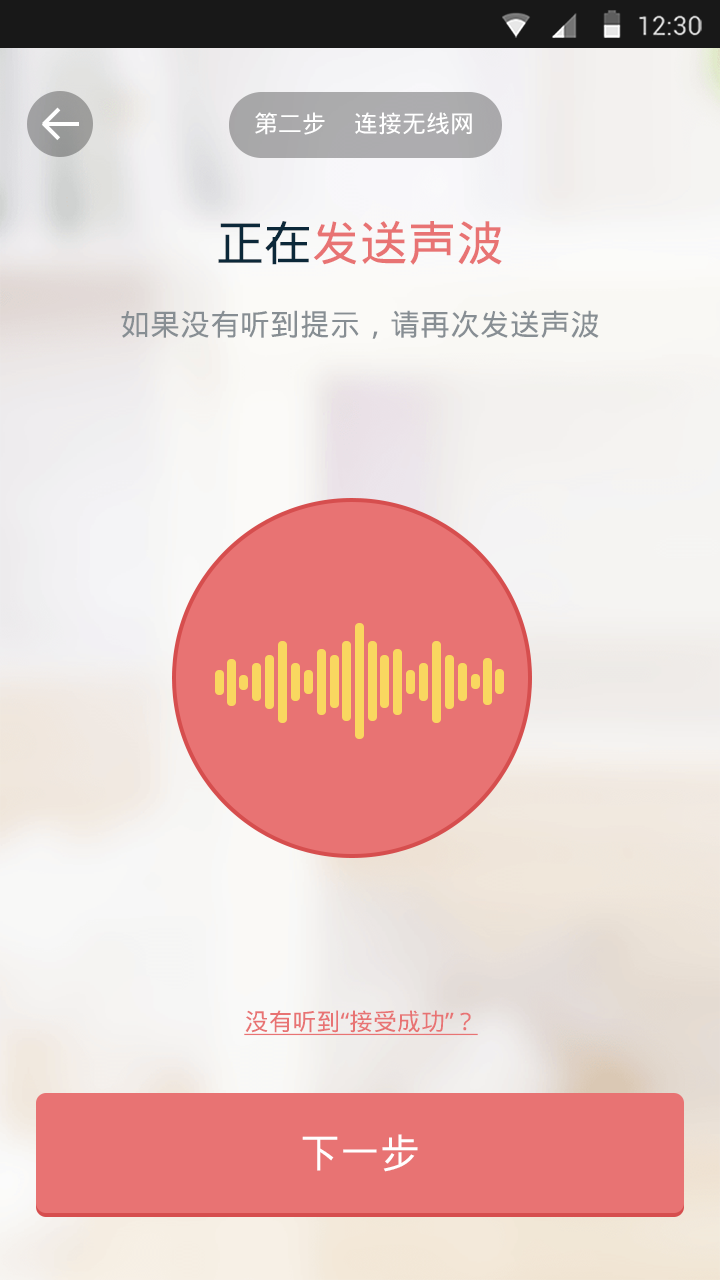
<style>
.page{position:relative;width:720px;height:1280px}
.page>*{position:absolute;margin:0}
.t1{font:24px "DroidSansFallback";color:#ffffff}
.t2{font:48px "DroidSansFallback";color:#e87373}
.t3{font:48px "DroidSansFallback";color:#0c2839}
.t4{font:30px "DroidSansFallback";color:#878e93}
.t5{font:24px "DroidSansFallback";color:#e87373;text-decoration:underline}
.t6{font:40px "DroidSansFallback";color:#ffffff}
</style>
<div class="page">
<p class="t1" style="left:255px;top:112px;width:70px;height:23px">第二步</p>
<p class="t1" style="left:355px;top:112px;width:117px;height:23px">连接无线网</p>
<p class="t2" style="left:218px;top:220px;width:284px;height:45px"><span class="t3">正在</span>发送声波</p>
<p class="t4" style="left:121px;top:310px;width:478px;height:29px">如果没有听到提示，请再次发送声波</p>
<p class="t5" style="left:244px;top:1010px;width:234px;height:26px">没有听到“接受成功”？</p>
<p class="t6" style="left:302px;top:1134px;width:116px;height:38px">下一步</p>
</div>
